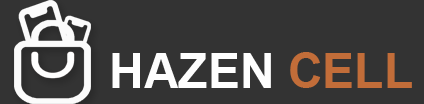
<style>
.page{position:relative;width:424px;height:104px;background:#333333}
.page>*{position:absolute;margin:0}
.t1{font:48px "Arial-BoldMT";color:#fefefe}
.t2{font:48px "Arial-BoldMT";color:#c26d39}
</style>
<div class="page">
<p class="t1" style="left:112px;top:52px;width:300px;height:36px">HAZEN <span class="t2">CELL</span></p>
</div>
